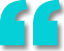
<style>
.page{position:relative;width:64px;height:51px;background:#05d0d7}
.page>*{position:absolute;margin:0}
.t1{font:125px "GothamBlack";letter-spacing:-0.05em;color:#05d0d7}
</style>
<div class="page">
<p class="t1" style="left:0px;top:0px;width:61px;height:46px">“</p>
</div>
